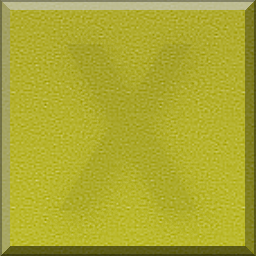
<style>
.page{position:relative;width:256px;height:256px}
.page>*{position:absolute;margin:0}
.t1{font:250px "FranklinGothic-Medium";color:#aaa72b}
</style>
<div class="page">
<p class="t1" style="left:58px;top:44px;width:140px;height:167px">X</p>
</div>
